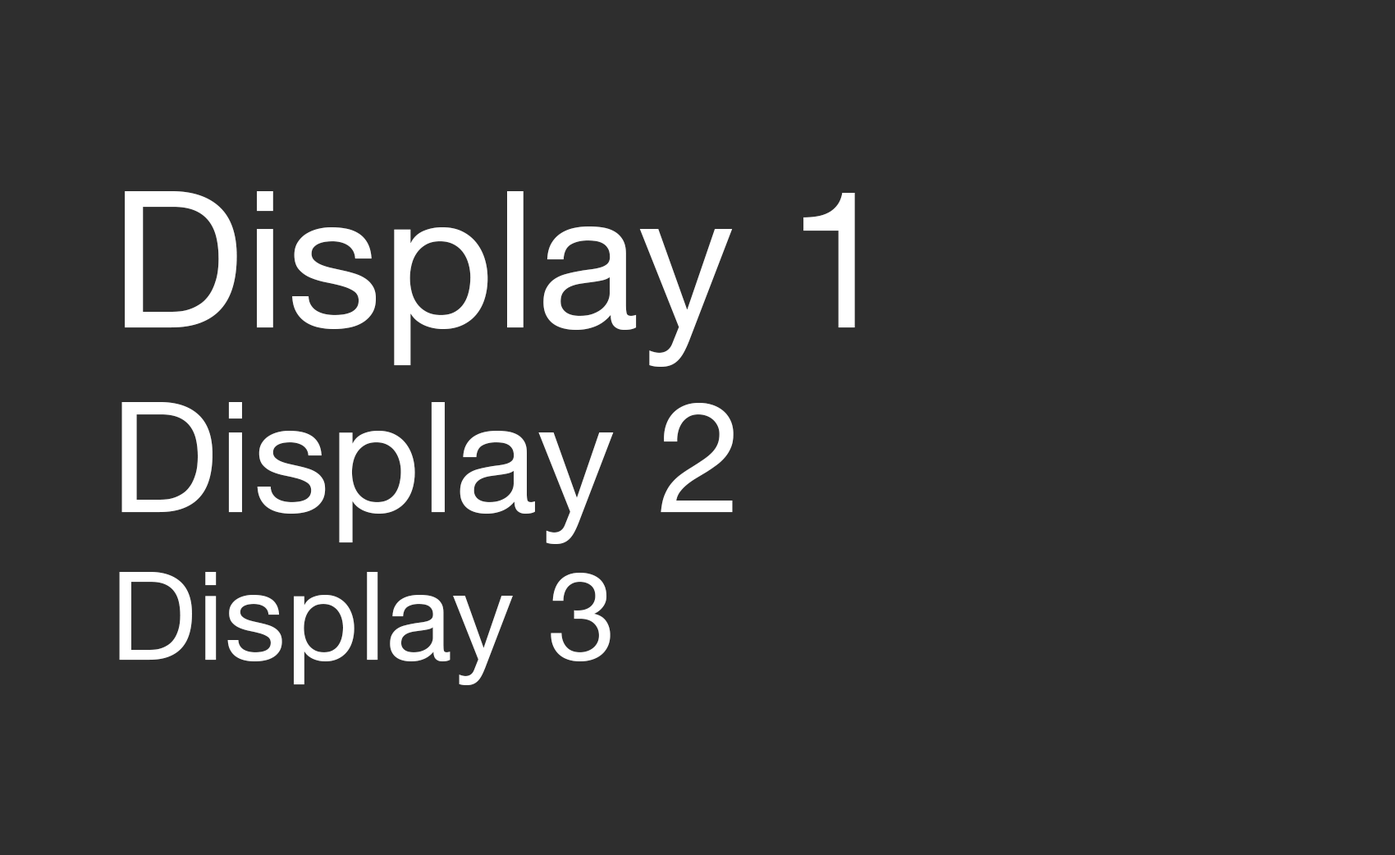
<style>
.page{position:relative;width:1395px;height:855px;background:#2e2e2e}
.page>*{position:absolute;margin:0}
.t1{font:190.3px "HelveticaNeue";color:#ffffff}
.t2{font:153.8px "HelveticaNeue";color:#ffffff}
.t3{font:123.1px "HelveticaNeue";color:#ffffff}
</style>
<div class="page">
<p class="t1" style="left:119px;top:191px;width:736px;height:494px">Display 1<br><span class="t2">Display 2<br></span><span class="t3">Display 3</span></p>
</div>
